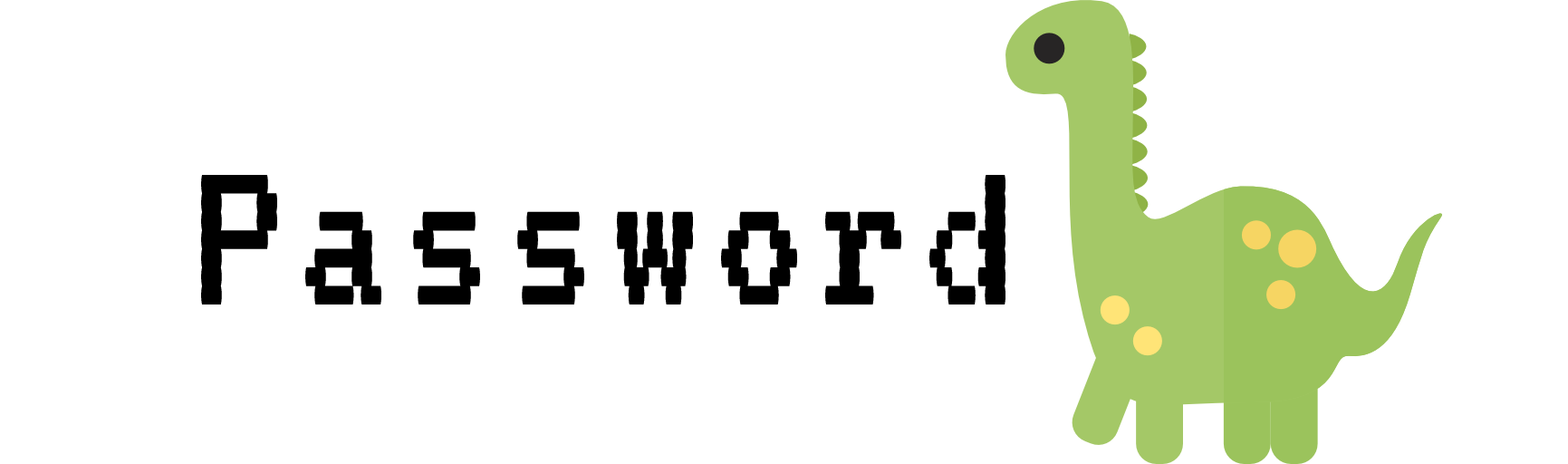
<style>
.page{position:relative;width:1568px;height:464px;background:#ffffff}
.page>*{position:absolute;margin:0}
.t1{font:231.3px "VT323-Regular";letter-spacing:0.05em;color:#000000}
</style>
<div class="page">
<p class="t1" style="left:201px;top:175px;width:804px;height:129px">Password</p>
</div>
